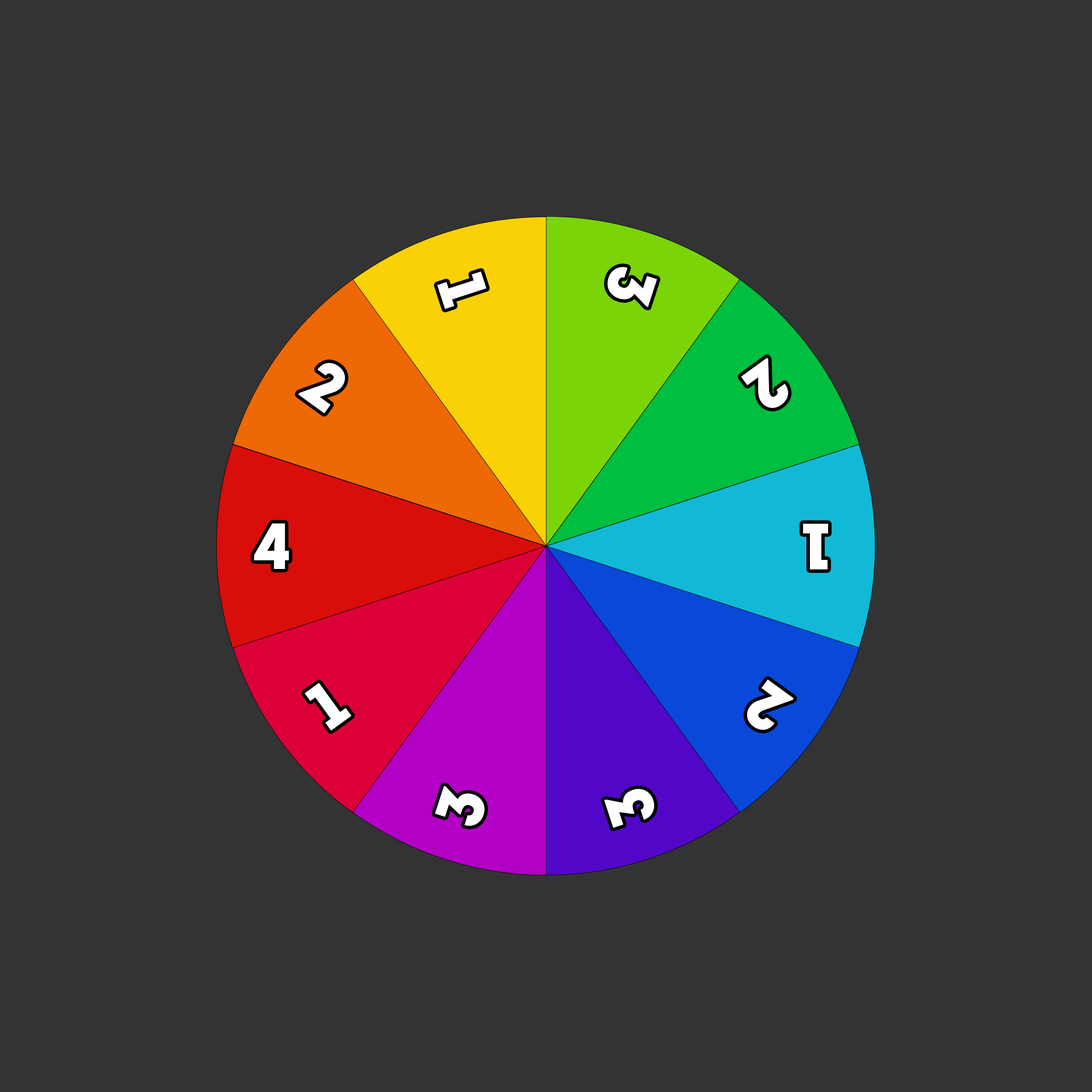
<style>
.page{position:relative;width:1092px;height:1092px;background:#333333}
.page>*{position:absolute;margin:0}
.t1{font:65px "Intro";letter-spacing:-0.075em;color:#ffffff}
</style>
<div class="page">
<p class="t1" style="left:608px;top:267px;width:49px;height:40px;rotate:108deg">3</p>
<p class="t1" style="left:437px;top:271px;width:50px;height:38px;rotate:72deg">1</p>
<p class="t1" style="left:298px;top:363px;width:47px;height:50px;rotate:36deg">2</p>
<p class="t1" style="left:741px;top:357px;width:47px;height:51px;rotate:144deg">2</p>
<p class="t1" style="left:254px;top:523px;width:35px;height:46px">4</p>
<p class="t1" style="left:803px;top:523px;width:25px;height:46px;rotate:180deg">1</p>
<p class="t1" style="left:305px;top:683px;width:46px;height:48px;rotate:-36deg">1</p>
<p class="t1" style="left:747px;top:679px;width:47px;height:51px;rotate:-144deg">2</p>
<p class="t1" style="left:435px;top:786px;width:49px;height:40px;rotate:-72deg">3</p>
<p class="t1" style="left:604px;top:789px;width:50px;height:39px;rotate:-108deg">3</p>
</div>
